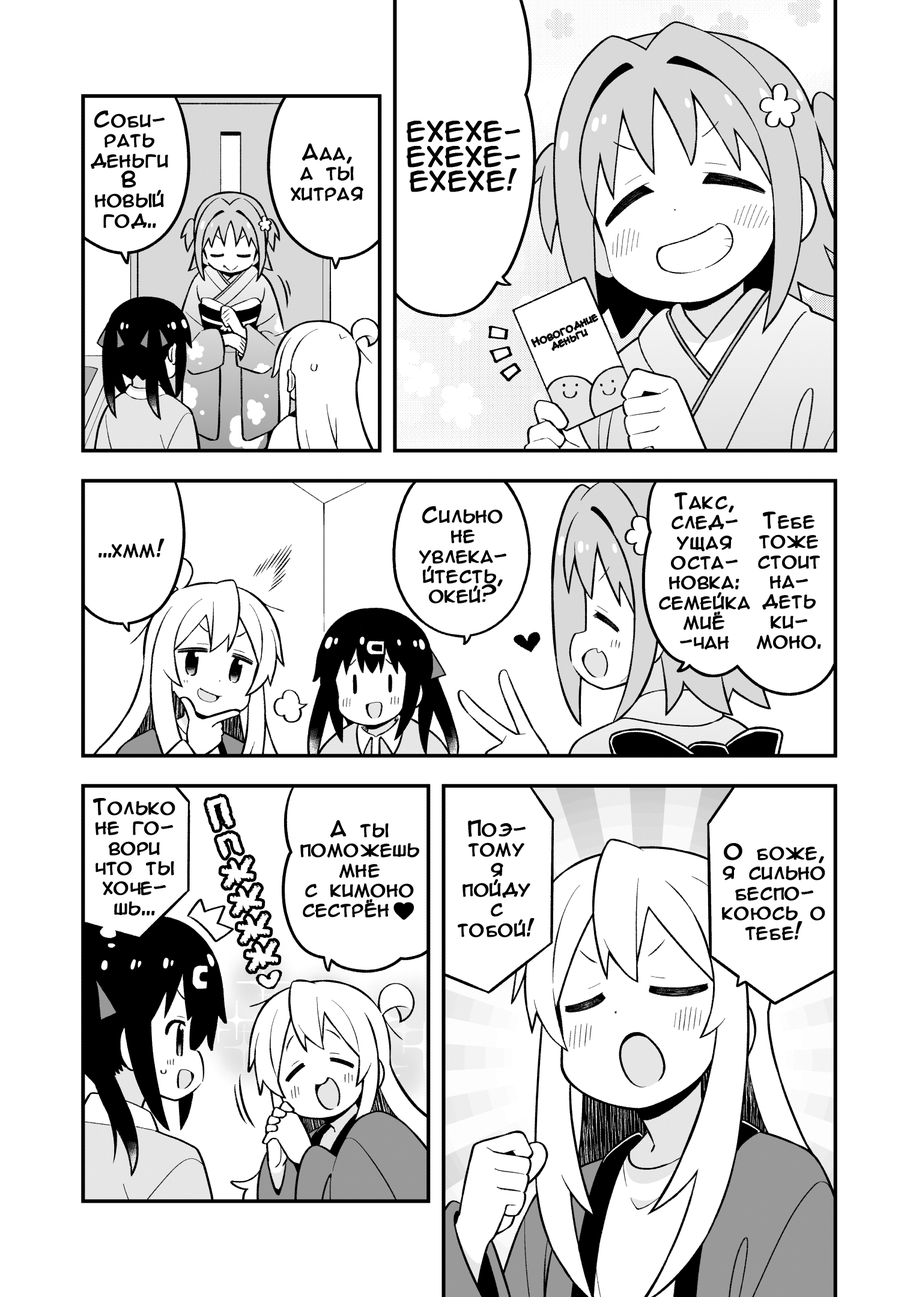
<style>
.page{position:relative;width:919px;height:1297px;background:#ffffff}
.page>*{position:absolute;margin:0}
.t1{font:20px/20px "AnimeAcev3";color:#000000;font-weight:bold}
.t2{font:25px/25px "AnimeAcev3";color:#000000;font-weight:bold}
.t3{font:10px/10px "AnimeAcev3";color:#000000;font-weight:bold}
.t4{font:20px "AnimeAcev3";color:#000000;font-weight:bold}
</style>
<div class="page">
<p class="t1" style="left:91px;top:111px;width:77px;height:118px;text-align:center">Соби-<br>рать<br>деньги<br>В<br>новый<br>год..</p>
<p class="t2" style="left:407px;top:121px;width:113px;height:71px;text-align:center">ЕХЕХЕ-<br>ЕХЕХЕ-<br>ЕХЕХЕ!</p>
<p class="t1" style="left:291px;top:144px;width:72px;height:57px;text-align:center">Ааа,<br>а ты<br>хитрая</p>
<p class="t3" style="left:531px;top:314px;width:67px;height:37px;text-align:center;rotate:-23deg">Новогодние<br>деньги</p>
<p class="t1" style="left:659px;top:493px;width:91px;height:157px;text-align:center">Такс,<br>след-<br>ущая<br>оста-<br>новка:<br>семейка<br>миё<br>-чан</p>
<p class="t1" style="left:419px;top:506px;width:87px;height:98px;text-align:center">Сильно<br>не<br>увлека-<br>йтесть,<br>окей?</p>
<p class="t1" style="left:757px;top:512px;width:64px;height:137px;text-align:center">Тебе<br>тоже<br>стоит<br>на-<br>деть<br>ки-<br>моно.</p>
<p class="t4" style="left:99px;top:539px;width:66px;height:19px">...хмм!</p>
<p class="t1" style="left:93px;top:798px;width:82px;height:118px;text-align:center">Только<br>не го-<br>вори<br>что ты<br>хоче-<br>шь...</p>
<p class="t1" style="left:458px;top:820px;width:77px;height:118px;text-align:center">Поэ-<br>тому<br>я<br>пойду<br>с<br>тобой!</p>
<p class="t1" style="left:722px;top:843px;width:103px;height:98px;text-align:center">О боже,<br>я сильно<br>беспо-<br>коюсь о<br>тебе!</p>
</div>
